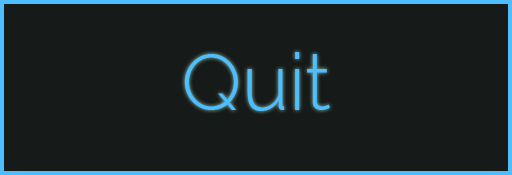
<style>
.page{position:relative;width:512px;height:175px;background:#161a19}
.page>*{position:absolute;margin:0}
.t1{font:80px "Raleway-Light";color:#4dbeff}
</style>
<div class="page">
<p class="t1" style="left:184px;top:52px;width:146px;height:59px">Quit</p>
</div>
